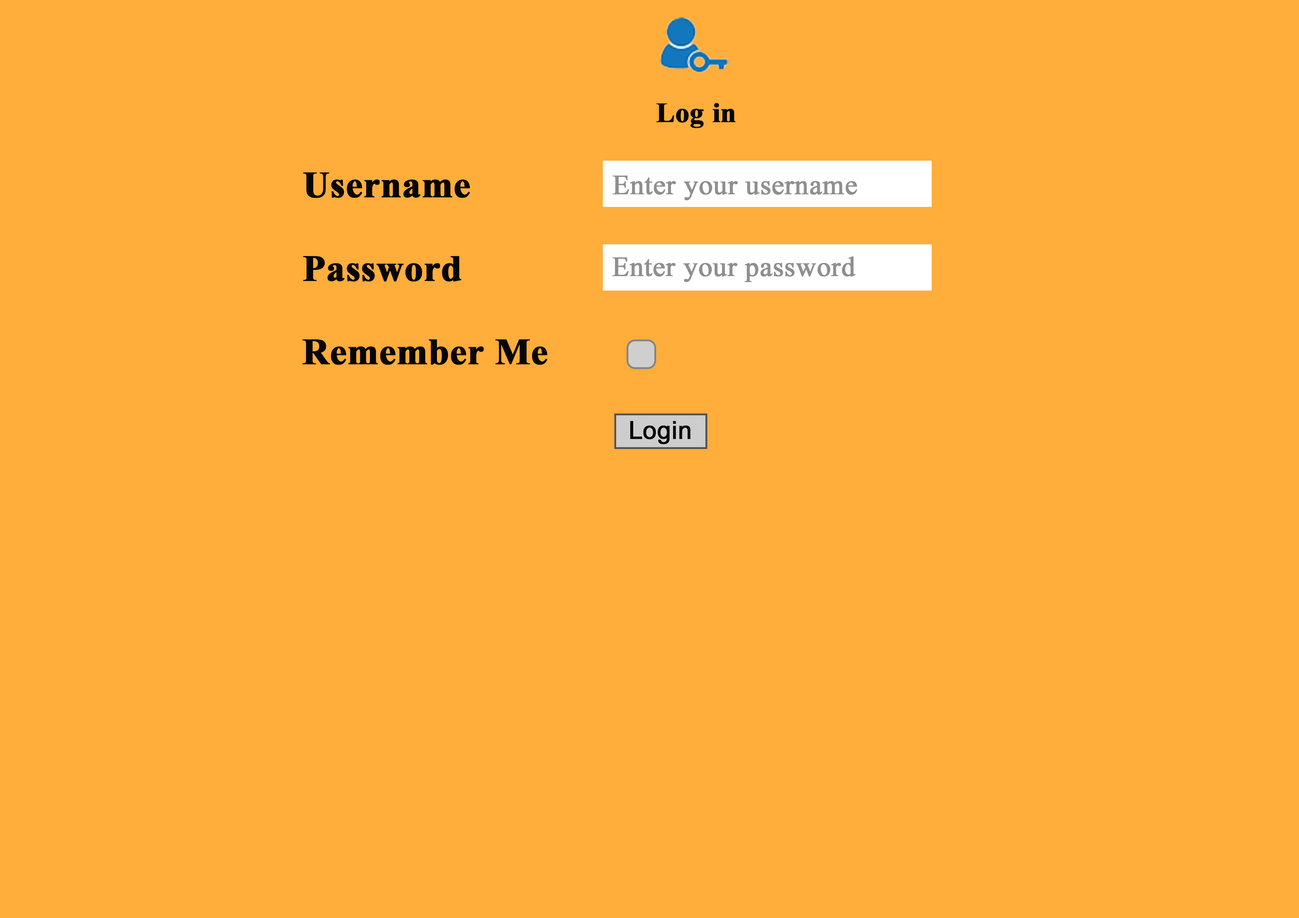
<style>
.page{position:relative;width:1299px;height:918px;background:#ffad3b}
.page>*{position:absolute;margin:0}
.t1{font:27.8px "TimesNewRomanPS-BoldMT";color:#070707;font-weight:bold}
.t2{font:37px "TimesNewRomanPS-BoldMT";color:#060606;font-weight:bold}
.t3{font:27.8px "TimesNewRomanPSMT";color:#8f8f8f;font-weight:bold}
.t4{font:24.7px "ArialMT";color:#070707;font-weight:bold}
</style>
<div class="page">
<p class="t1" style="left:656px;top:103px;width:80px;height:25px">Log in</p>
<p class="t2" style="left:303px;top:172px;width:167px;height:26px">Username</p>
<p class="t3" style="left:612px;top:175px;width:245px;height:25px">Enter your username</p>
<p class="t2" style="left:303px;top:256px;width:158px;height:26px">Password</p>
<p class="t3" style="left:612px;top:256px;width:244px;height:26px">Enter your password</p>
<p class="t2" style="left:302px;top:339px;width:245px;height:26px">Remember Me</p>
<p class="t4" style="left:630px;top:421px;width:60px;height:23px">Login</p>
</div>
